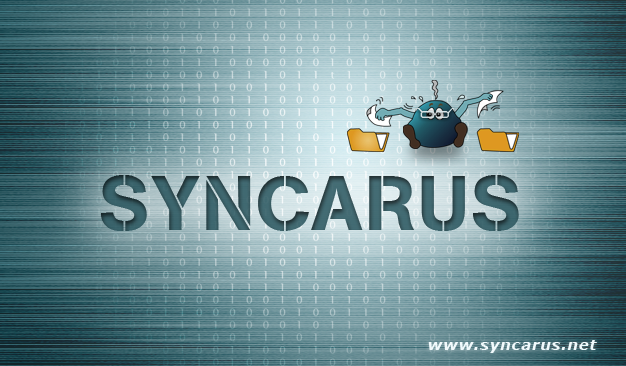
<style>
.page{position:relative;width:626px;height:366px}
.page>*{position:absolute;margin:0}
.t1{font:76.8px "Absolute";letter-spacing:0.05em;color:#3b6269}
.t2{font:76.8px "Absolute";letter-spacing:0.05em;color:#366068}
.t3{font:15px "Verdana-BoldItalic";letter-spacing:0.05em;color:#f1fafc}
</style>
<div class="page">
<p class="t1" style="left:101px;top:175px;width:418px;height:56px">SYNCARUS</p>
<p class="t2" style="left:101px;top:175px;width:418px;height:56px;opacity:0.9">SYNCARUS</p>
<p class="t3" style="left:428px;top:340px;width:169px;height:13px">www.syncarus.net</p>
</div>
